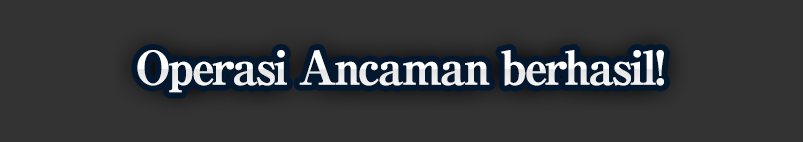
<style>
.page{position:relative;width:803px;height:142px;background:#333333}
.page>*{position:absolute;margin:0}
.t1{font:46px "RyuminPro-ExBold";letter-spacing:-0.08em;color:#ffffff;font-weight:bold}
</style>
<div class="page">
<p class="t1" style="left:137px;top:50px;width:527px;height:43px">Operasi Ancaman berhasil!</p>
</div>
